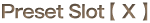
<style>
.page{position:relative;width:150px;height:23px;background:#ffffff}
.page>*{position:absolute;margin:0}
.t1{font:18px "GothicMB101Pro-DeBold";letter-spacing:-0.04em}
</style>
<div class="page">
<p class="t1" style="left:2px;top:2px;width:146px;height:19px">Preset Slot【     】</p>
<p class="t1" style="left:122px;top:4px;width:14px;height:15px">X</p>
</div>
